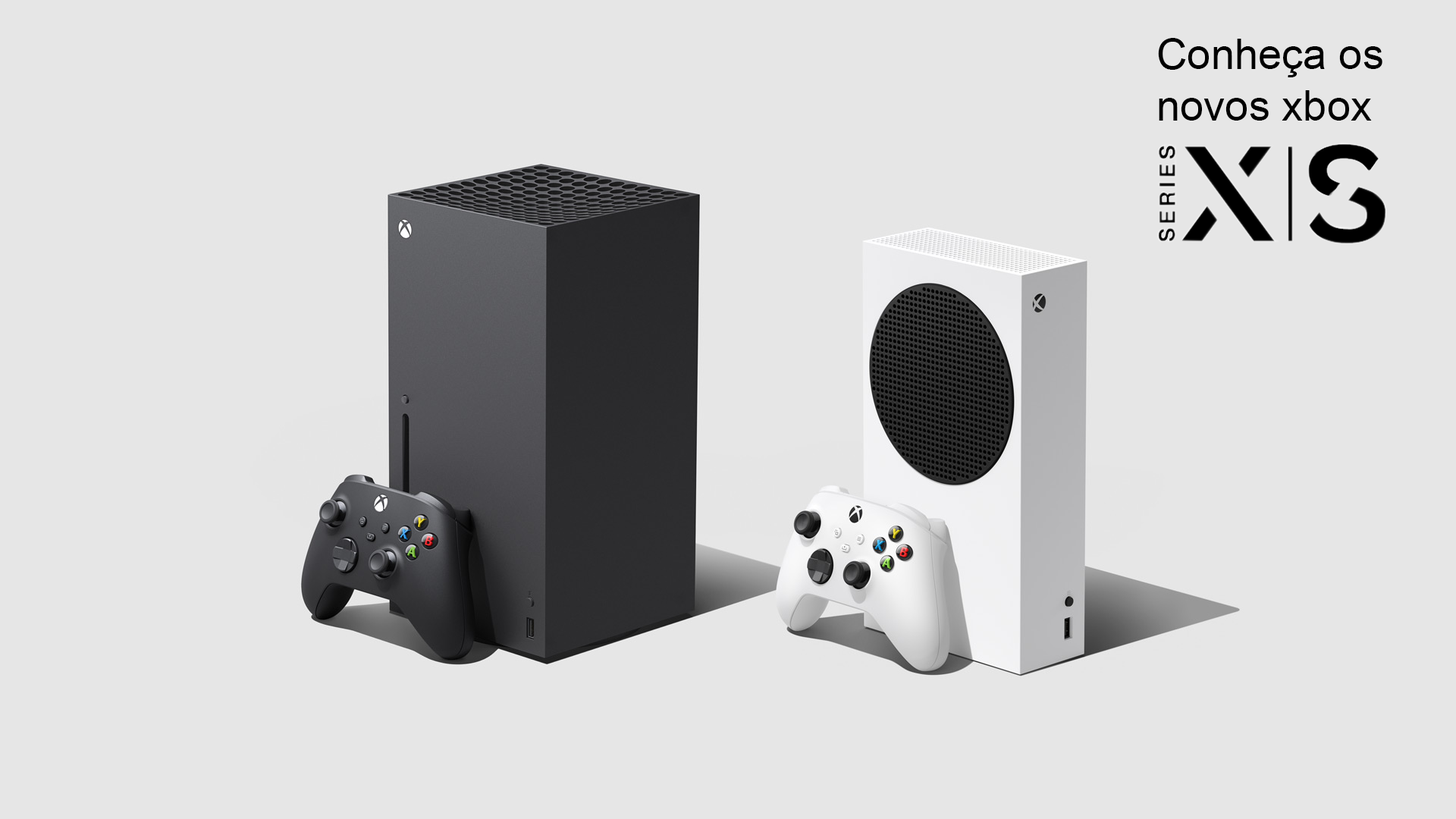
<style>
.page{position:relative;width:1456px;height:819px;background:#e6e6e6}
.page>*{position:absolute;margin:0}
.t1{font:42.6px "ArialMT";color:#000000}
</style>
<div class="page">
<p class="t1" style="left:1158px;top:38px;width:224px;height:83px">Conheça os novos xbox</p>
</div>
